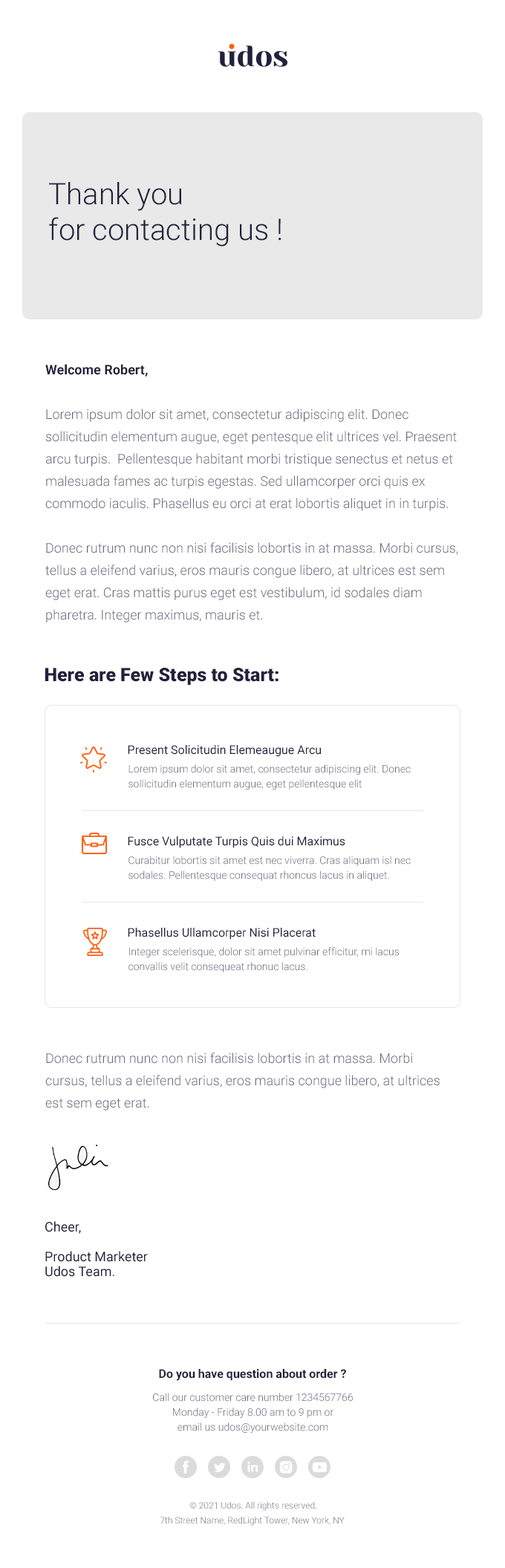
<style>
.page{position:relative;width:505px;height:1568px;background:#ffffff}
.page>*{position:absolute;margin:0}
.t1{font:29.7px "Roboto-Light";color:#21213b}
.t2{font:13.4px/22.3px "Roboto-Light";color:#66667e}
.t3{font:13.4px/22.3px "Roboto-Bold";color:#21213b}
.t4{font:18.6px "Roboto-Black";color:#21213b}
.t5{font:11.9px "Roboto-Regular";color:#21213b}
.t6{font:10.4px/14.9px "Roboto-Light";color:#66667e}
.t7{font:13.4px/14.9px "Roboto-Regular";color:#21213b}
.t8{font:11.9px "Roboto-Bold";color:#21213b}
.t9{font:8.9px/14.9px "Roboto-Light";color:#66667e}
</style>
<div class="page">
<p class="t1" style="left:49px;top:182px;width:233px;height:65px">Thank you<br>for contacting us !</p>
<p class="t2" style="left:45px;top:364px;width:413px;height:258px"><span class="t3">Welcome Robert,<br></span><br>Lorem ipsum dolor sit amet, consectetur adipiscing elit. Donec sollicitudin elementum augue, eget pentesque elit ultrices vel. Praesent arcu turpis.  Pellentesque habitant morbi tristique senectus et netus et malesuada fames ac turpis egestas. Sed ullamcorper orci quis ex commodo iaculis. Phasellus eu orci at erat lobortis aliquet in in turpis. <br><br>Donec rutrum nunc non nisi facilisis lobortis in at massa. Morbi cursus, tellus a eleifend varius, eros mauris congue libero, at ultrices est sem eget erat. Cras mattis purus eget est vestibulum, id sodales diam pharetra. Integer maximus, mauris et.</p>
<p class="t4" style="left:45px;top:668px;width:234px;height:17px">Here are Few Steps to Start:</p>
<p class="t5" style="left:128px;top:745px;width:193px;height:12px">Present Solicitudin Elemeaugue Arcu</p>
<p class="t6" style="left:129px;top:764px;width:282px;height:26px">Lorem ipsum dolor sit amet, consectetur adipiscing elit. Donec sollicitudin elementum augue, eget pellentesque elit</p>
<p class="t5" style="left:128px;top:836px;width:217px;height:12px">Fusce Vulputate Turpis Quis dui Maximus</p>
<p class="t6" style="left:129px;top:856px;width:282px;height:25px">Curabitur lobortis sit amet est nec viverra. Cras aliquam isl nec sodales. Pellentesque consequat rhoncus lacus in aliquet.</p>
<p class="t5" style="left:128px;top:928px;width:188px;height:12px">Phasellus Ullamcorper Nisi Placerat</p>
<p class="t6" style="left:129px;top:947px;width:270px;height:25px">Integer scelerisque, dolor sit amet pulvinar efficitur, mi lacus<br>convallis velit consequeat rhonuc lacus.</p>
<p class="t2" style="left:45px;top:1053px;width:395px;height:57px">Donec rutrum nunc non nisi facilisis lobortis in at massa. Morbi cursus, tellus a eleifend varius, eros mauris congue libero, at ultrices est sem eget erat.</p>
<p class="t7" style="left:45px;top:1221px;width:103px;height:56px">Cheer,<br><br>Product Marketer<br>Udos Team.</p>
<p class="t8" style="left:159px;top:1369px;width:187px;height:12px">Do you have question about order ?</p>
<p class="t6" style="left:153px;top:1393px;width:200px;height:40px;text-align:center">Call our customer care number 1234567766<br>Monday - Friday 8.00 am to 9 pm or <br>email us udos@yourwebsite.com</p>
<p class="t9" style="left:160px;top:1501px;width:185px;height:25px;text-align:center">© 2021 Udos. All rights reserved.<br>7th Street Name, RedLight Tower, New York, NY</p>
</div>
